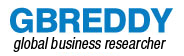
<style>
.page{position:relative;width:184px;height:56px;background:#ffffff}
.page>*{position:absolute;margin:0}
.t1{font:17px "SansProCd";color:#000000;font-style:italic}
</style>
<div class="page">
<p class="t1" style="left:13px;top:37px;width:153px;height:15px">global business researcher</p>
</div>
